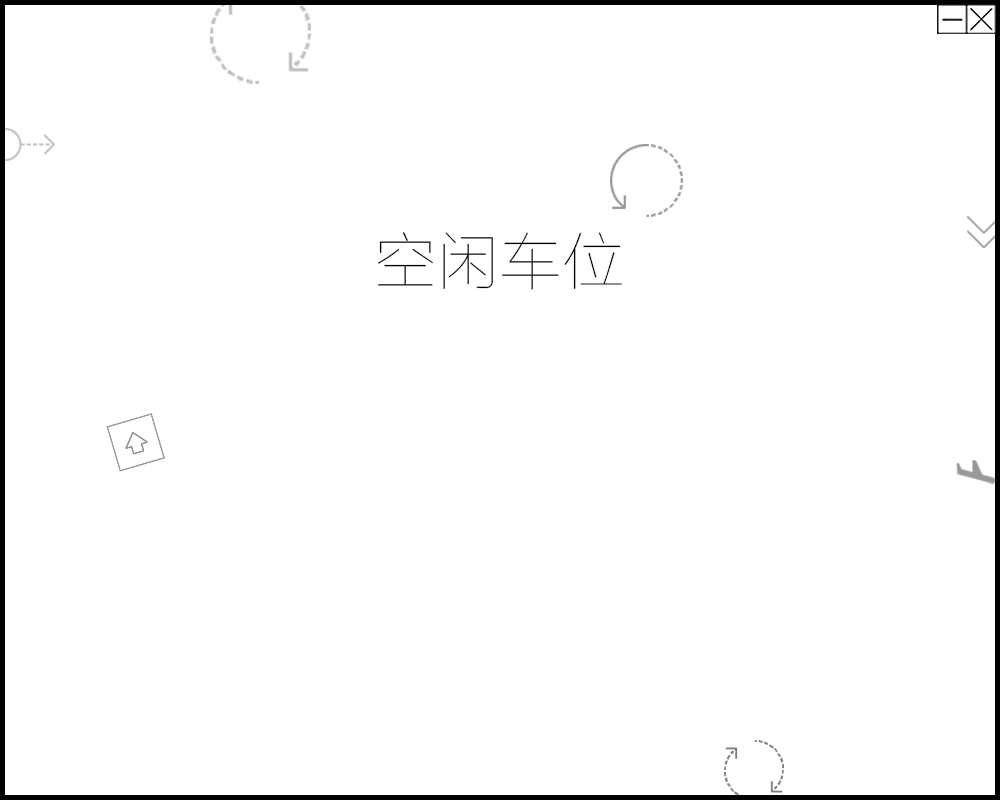
<style>
.page{position:relative;width:1000px;height:800px;background:#ffffff}
.page>*{position:absolute;margin:0}
.t1{font:62.6px "FZLTCXHJW--GB1-0";color:#000000}
</style>
<div class="page">
<p class="t1" style="left:377px;top:232px;width:245px;height:58px">空闲车位</p>
</div>
